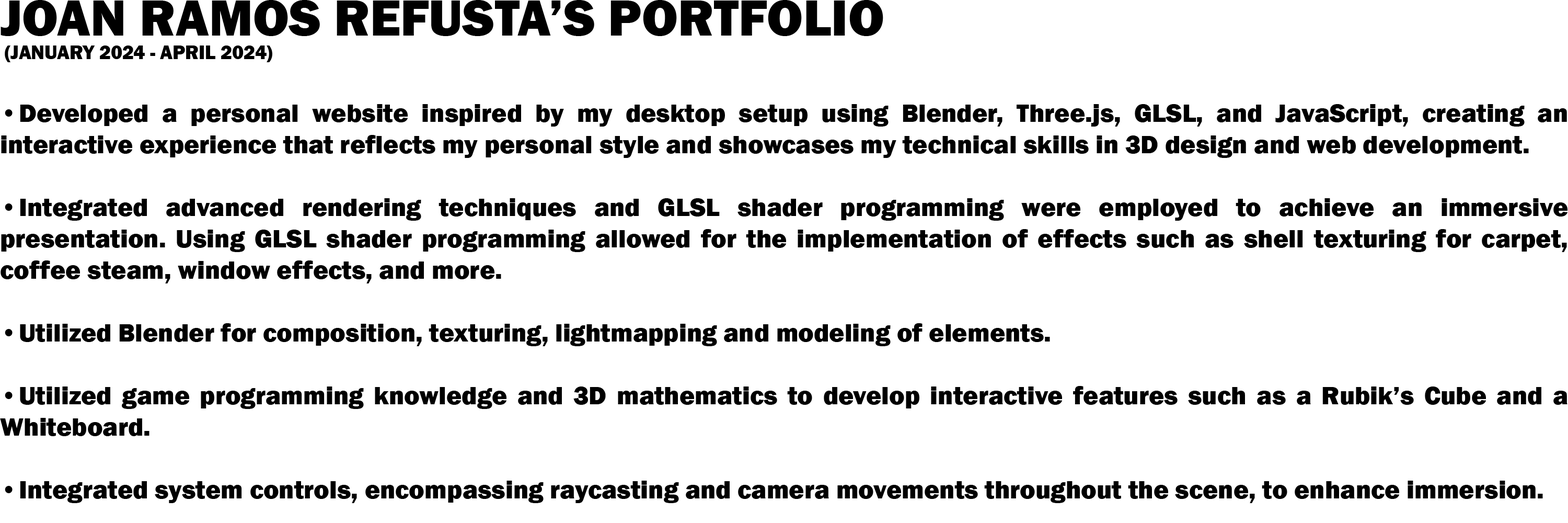
<style>
.page{position:relative;width:1568px;height:523px;background:#ffffff}
.page>*{position:absolute;margin:0}
.t1{font:26.1px "FranklinGothic-Heavy";color:#000000}
.t2{font:52.3px "FranklinGothic-Heavy";color:#000000}
.t3{font:19.6px "FranklinGothic-Heavy";color:#000000}
</style>
<div class="page">
<p class="t1" style="left:0px;top:0px;width:1567px;height:503px"><span class="t2">JOAN RAMOS REFUSTA’S PORTFOLIO<br></span><span class="t3"> (JANUARY 2024 - APRIL 2024)<br></span><br>• Developed a personal website inspired by my desktop setup using Blender, Three.js, GLSL, and JavaScript, creating an interactive experience that reflects my personal style and showcases my technical skills in 3D design and web development.<br><br>• Integrated advanced rendering techniques and GLSL shader programming were employed to achieve an immersive presentation. Using GLSL shader programming allowed for the implementation of effects such as shell texturing for carpet, coffee steam, window effects, and more.<br><br>• Utilized Blender for composition, texturing, lightmapping and modeling of elements.<br><br>• Utilized game programming knowledge and 3D mathematics to develop interactive features such as a Rubik’s Cube and a Whiteboard.  <br><br>• Integrated system controls, encompassing raycasting and camera movements throughout the scene, to enhance immersion.</p>
</div>
